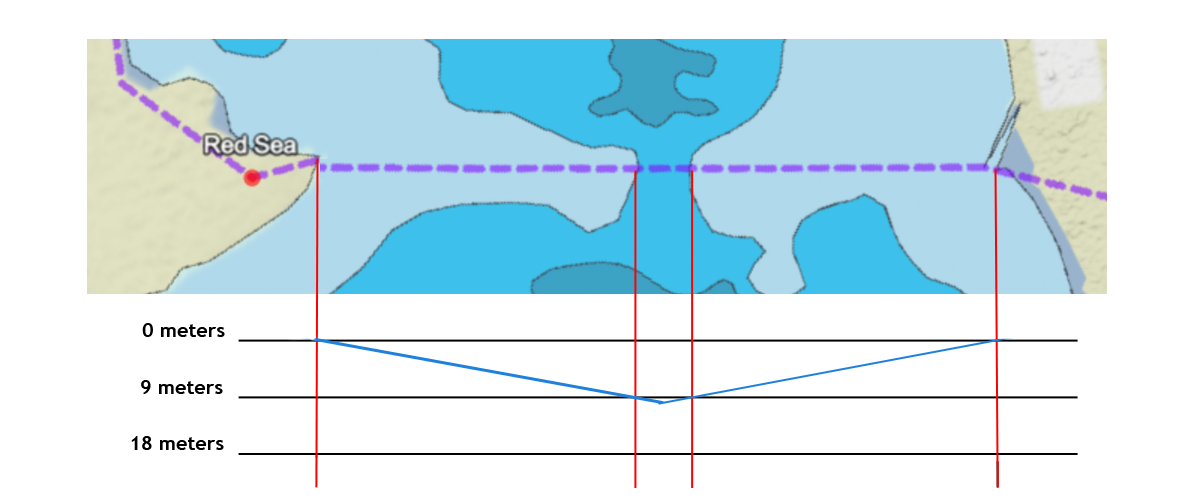
<style>
.page{position:relative;width:1200px;height:500px;background:#ffffff}
.page>*{position:absolute;margin:0}
.t1{font:20px "TrebuchetMS-Bold";color:#000000}
</style>
<div class="page">
<p class="t1" style="left:142px;top:323px;width:83px;height:14px">0 meters</p>
<p class="t1" style="left:141px;top:380px;width:82px;height:14px">9 meters</p>
<p class="t1" style="left:131px;top:436px;width:93px;height:14px">18 meters</p>
</div>
